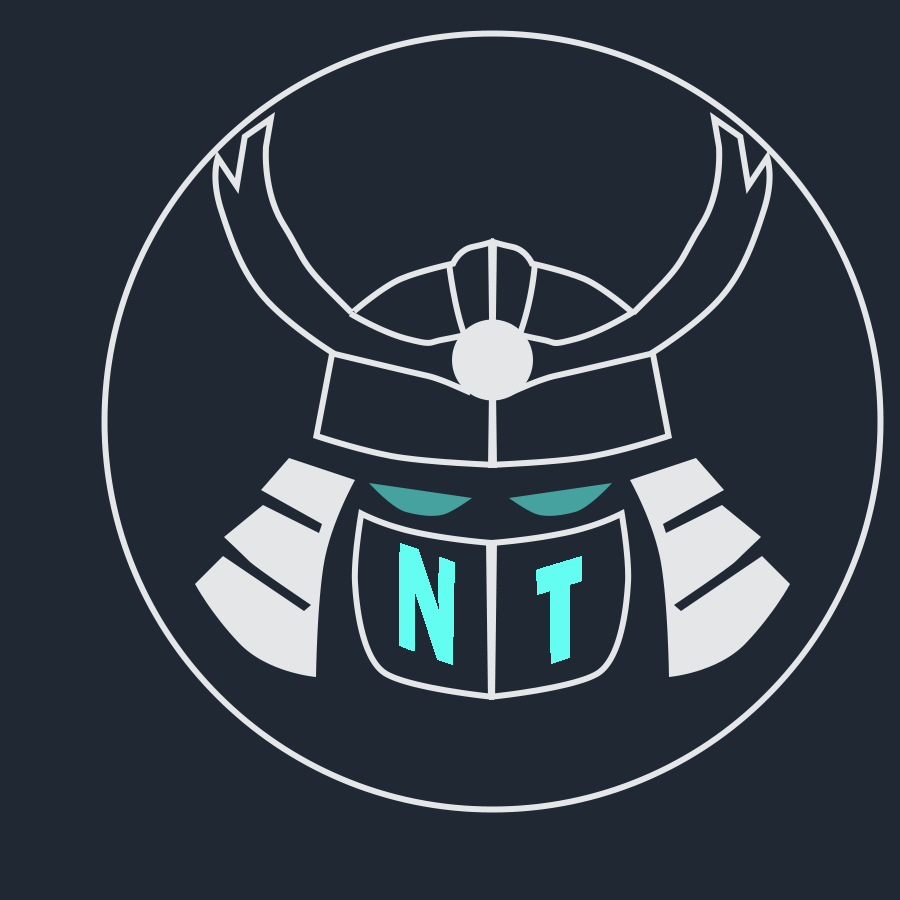
<style>
.page{position:relative;width:900px;height:900px;background:#202833}
.page>*{position:absolute;margin:0}
.t1{font:96px "FranklinGothic-Heavy";letter-spacing:0.05em;color:#64fdf1}
</style>
<div class="page">
<p class="t1" style="left:399px;top:543px;width:56px;height:122px">N</p>
<p class="t1" style="left:536px;top:556px;width:46px;height:108px;rotate:180deg">T</p>
</div>
